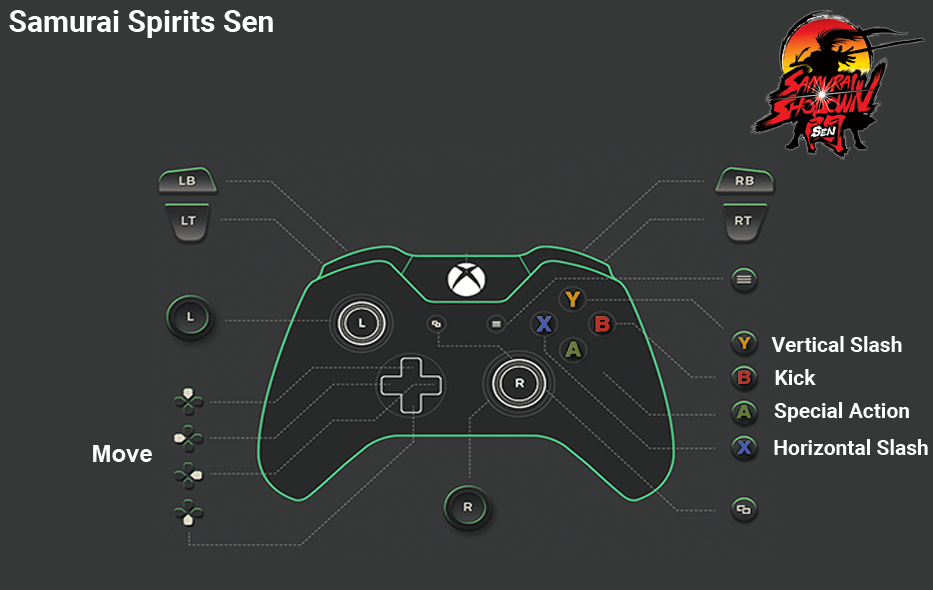
<style>
.page{position:relative;width:933px;height:590px;background:#363838}
.page>*{position:absolute;margin:0}
.t1{font:30px "Roboto-Bold";color:#ffffff}
.t2{font:21px "Roboto-Bold";color:#ffffff}
.t3{font:24px "Arial-BoldMT";color:#fefefe}
</style>
<div class="page">
<p class="t1" style="left:9px;top:10px;width:264px;height:28px">Samurai Spirits Sen</p>
<p class="t2" style="left:771px;top:336px;width:131px;height:16px">Vertical Slash</p>
<p class="t2" style="left:775px;top:369px;width:41px;height:16px">Kick</p>
<p class="t2" style="left:774px;top:402px;width:135px;height:20px">Special Action</p>
<p class="t3" style="left:93px;top:445px;width:59px;height:17px">Move</p>
<p class="t2" style="left:774px;top:439px;width:154px;height:16px">Horizontal Slash</p>
</div>
